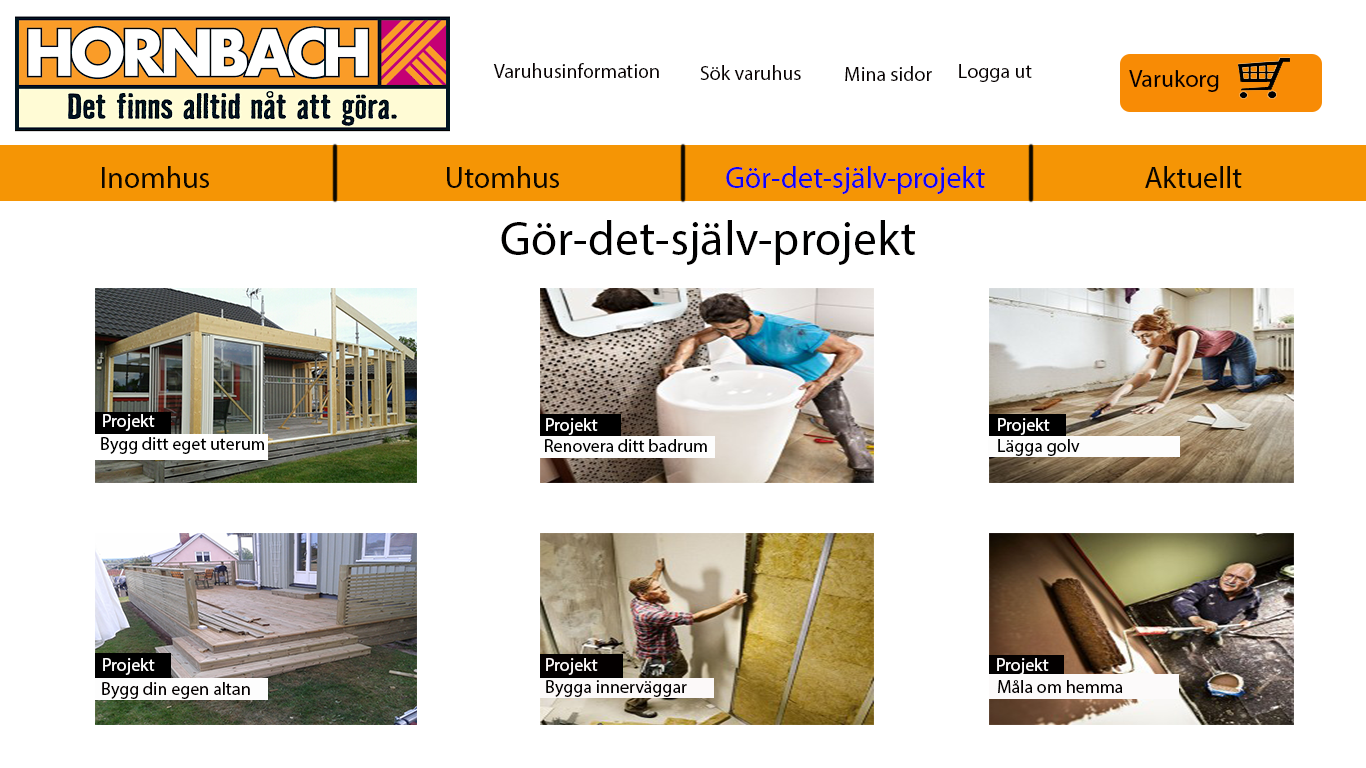
<style>
.page{position:relative;width:1366px;height:768px;background:#ffffff}
.page>*{position:absolute;margin:0}
.t1{font:20px "MyriadPro-Regular";color:#060000}
.t2{font:24px "MyriadPro-Regular";color:#060000}
.t3{font:30px "MyriadPro-Regular";color:#0b0700}
.t4{font:30px "MyriadPro-Regular";color:#0f04f8}
.t5{font:48px "MyriadPro-Regular";color:#010000}
.t6{font:18px "MyriadPro-Regular";color:#ffffff}
.t7{font:18px "MyriadPro-Regular";color:#000000}
.t8{font:18px "MyriadPro-Regular";color:#fdfdfd}
.t9{font:18px "MyriadPro-Regular";color:#fcf9f9}
.t10{font:18px "MyriadPro-Regular";color:#fcfafa}
.t11{font:18px "MyriadPro-Regular";color:#040000}
.t12{font:18px "MyriadPro-Regular";color:#030000}
</style>
<div class="page">
<p class="t1" style="left:493px;top:63px;width:166px;height:15px">Varuhusinformation</p>
<p class="t1" style="left:700px;top:65px;width:101px;height:15px">Sök varuhus</p>
<p class="t1" style="left:959px;top:64px;width:73px;height:18px">Logga ut</p>
<p class="t1" style="left:845px;top:66px;width:87px;height:15px">Mina sidor</p>
<p class="t2" style="left:1129px;top:70px;width:90px;height:22px">Varukorg</p>
<p class="t3" style="left:102px;top:166px;width:107px;height:22px">Inomhus</p>
<p class="t3" style="left:447px;top:166px;width:112px;height:22px">Utomhus</p>
<p class="t4" style="left:726px;top:166px;width:259px;height:28px">Gör-det-själv-projekt</p>
<p class="t3" style="left:1145px;top:166px;width:97px;height:22px">Aktuellt</p>
<p class="t5" style="left:501px;top:220px;width:414px;height:45px">Gör-det-själv-projekt</p>
<p class="t6" style="left:103px;top:414px;width:52px;height:17px">Projekt</p>
<p class="t6" style="left:546px;top:418px;width:52px;height:17px">Projekt</p>
<p class="t6" style="left:998px;top:418px;width:52px;height:17px">Projekt</p>
<p class="t7" style="left:101px;top:437px;width:163px;height:17px">Bygg ditt eget uterum</p>
<p class="t7" style="left:545px;top:439px;width:162px;height:13px">Renovera ditt badrum</p>
<p class="t7" style="left:998px;top:439px;width:82px;height:17px">Lägga golv</p>
<p class="t8" style="left:103px;top:658px;width:52px;height:17px">Projekt</p>
<p class="t9" style="left:546px;top:658px;width:52px;height:17px">Projekt</p>
<p class="t10" style="left:997px;top:658px;width:52px;height:17px">Projekt</p>
<p class="t11" style="left:102px;top:682px;width:148px;height:17px">Bygg din egen altan</p>
<p class="t12" style="left:546px;top:680px;width:141px;height:17px">Bygga innerväggar</p>
<p class="t12" style="left:998px;top:680px;width:125px;height:13px">Måla om hemma</p>
</div>
